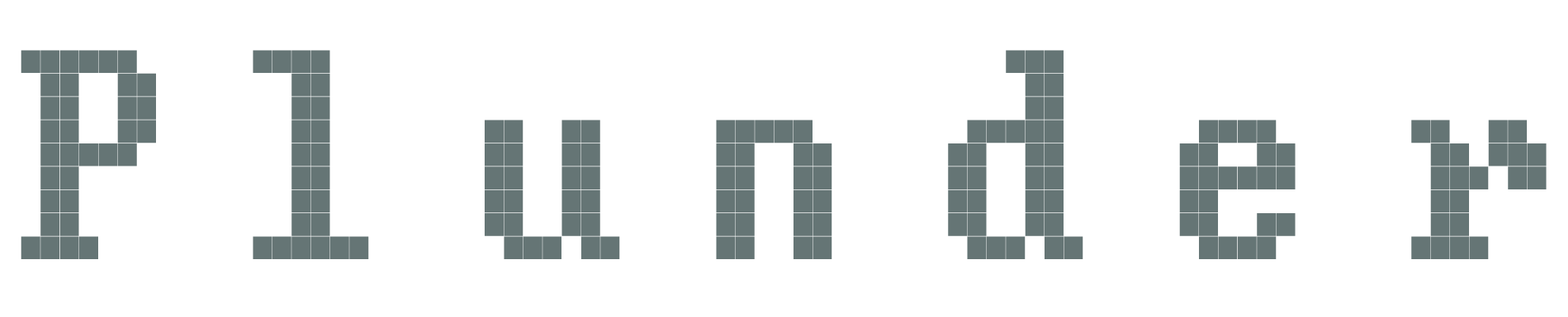
<style>
.page{position:relative;width:1568px;height:317px;background:#ffffff}
.page>*{position:absolute;margin:0}
.t1{font:372.2px "Code";color:#657575;scale:0.83 1}
</style>
<div class="page">
<p class="t1" style="left:21px;top:50px;width:1526px;height:209px">Plunder</p>
</div>
